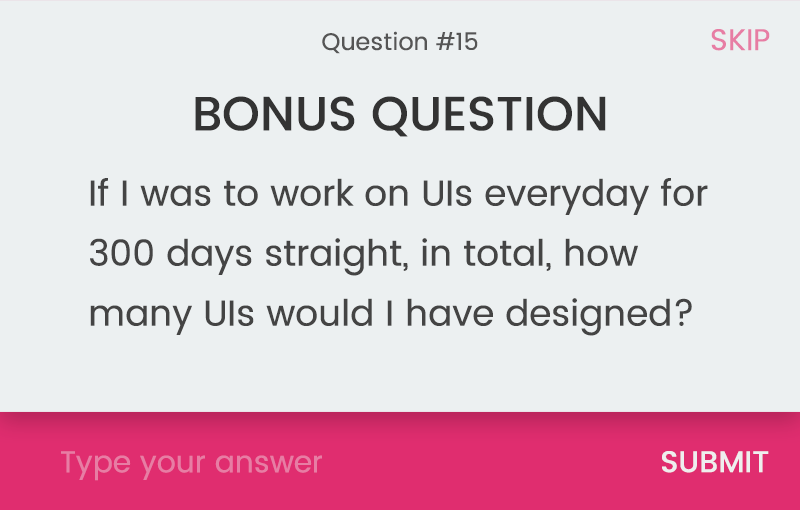
<style>
.page{position:relative;width:800px;height:510px;background:#ecf0f1}
.page>*{position:absolute;margin:0}
.t1{font:30px "Poppins-Regular";color:#e77da4}
.t2{font:24px "Poppins-Regular";color:#555555}
.t3{font:48px "Poppins-Medium";color:#333333}
.t4{font:36px/60px "Poppins-Regular";color:#444444}
.t5{font:30px "Poppins-Medium";color:#eeeeee}
</style>
<div class="page">
<p class="t1" style="left:711px;top:29px;width:59px;height:22px">SKIP</p>
<p class="t2" style="left:322px;top:31px;width:156px;height:23px">Question #15</p>
<p class="t3" style="left:195px;top:96px;width:411px;height:41px">BONUS QUESTION</p>
<p class="t4" style="left:90px;top:178px;width:618px;height:158px">If I was to work on UIs everyday for<br>300 days straight, in total, how many UIs would I have designed?</p>
<p class="t1" style="left:61px;top:451px;width:261px;height:30px">Type your answer</p>
<p class="t5" style="left:662px;top:451px;width:107px;height:22px">SUBMIT</p>
</div>
